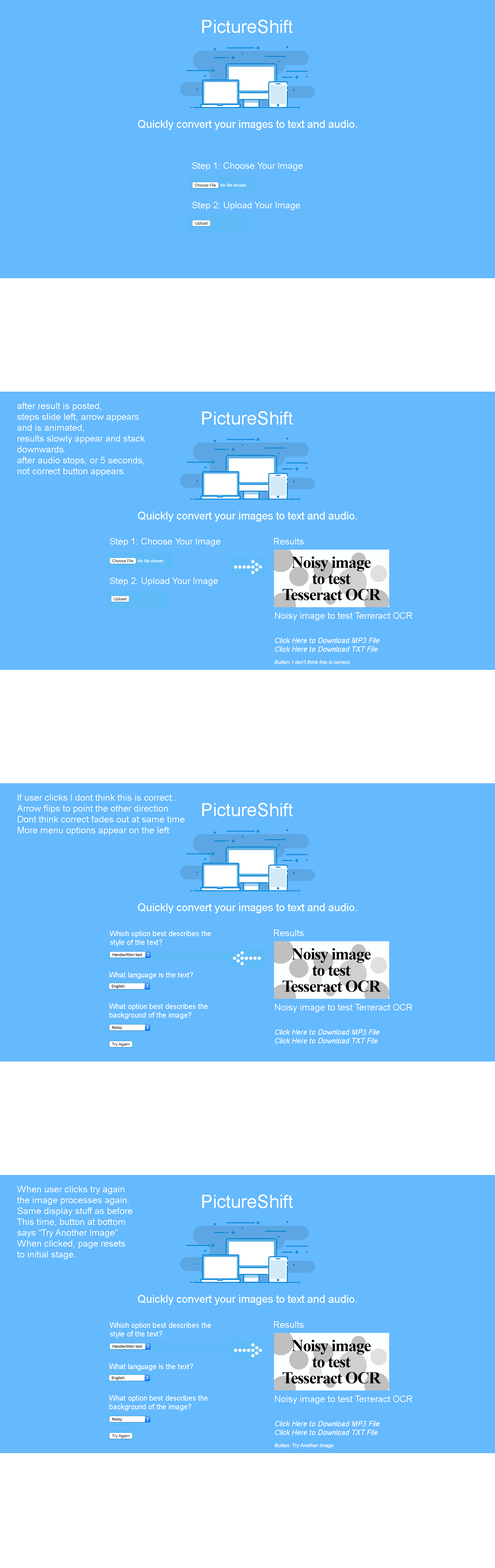
<style>
.page{position:relative;width:495px;height:1568px;background:#65b9fd}
.page>*{position:absolute;margin:0}
.t1{font:18.1px "ArialMT";color:#ffffff}
.t2{font:10.9px "ArialMT";color:#ffffff}
.t3{font:9.1px "ArialMT";color:#ffffff}
.t4{font:7.2px "ArialMT";color:#ffffff;font-style:italic}
.t5{font:5.1px "ArialMT";color:#ffffff;font-style:italic}
.t6{font:7.2px "ArialMT";color:#ffffff}
</style>
<div class="page">
<p class="t1" style="left:202px;top:20px;width:91px;height:13px">PictureShift</p>
<p class="t2" style="left:138px;top:120px;width:219px;height:10px">Quickly convert your images to text and audio.</p>
<p class="t3" style="left:192px;top:162px;width:111px;height:9px">Step 1: Choose Your Image</p>
<p class="t3" style="left:192px;top:202px;width:108px;height:8px">Step 2: Upload Your Image</p>
<p class="t3" style="left:17px;top:403px;width:128px;height:73px">after result is posted,<br>steps slide left, arrow appears<br>and is animated,<br>results slowly appear and stack<br>downwards.<br>after audio stops, or 5 seconds,<br>not correct button appears.</p>
<p class="t1" style="left:202px;top:411px;width:91px;height:14px">PictureShift</p>
<p class="t2" style="left:138px;top:512px;width:219px;height:10px">Quickly convert your images to text and audio.</p>
<p class="t3" style="left:110px;top:538px;width:110px;height:8px">Step 1: Choose Your Image</p>
<p class="t3" style="left:274px;top:538px;width:30px;height:7px">Results</p>
<p class="t3" style="left:110px;top:577px;width:108px;height:9px">Step 2: Upload Your Image</p>
<p class="t3" style="left:275px;top:612px;width:137px;height:9px">Noisy image to test Terreract OCR</p>
<p class="t4" style="left:275px;top:638px;width:104px;height:14px">Click Here to Download MP3 File<br>Click Here to Download TXT File</p>
<p class="t5" style="left:275px;top:660px;width:75px;height:4px">Button: I don’t think this is correct.</p>
<p class="t3" style="left:17px;top:794px;width:167px;height:41px">If user clicks I dont think this is correct..<br>Arrow flips to point the other direction<br>Dont think correct fades out at same time<br>More menu options appear on the left</p>
<p class="t1" style="left:202px;top:803px;width:91px;height:14px">PictureShift</p>
<p class="t2" style="left:138px;top:903px;width:219px;height:10px">Quickly convert your images to text and audio.</p>
<p class="t3" style="left:274px;top:930px;width:30px;height:6px">Results</p>
<p class="t6" style="left:110px;top:931px;width:101px;height:15px">Which option best describes the<br>style of the text?</p>
<p class="t6" style="left:109px;top:972px;width:84px;height:7px">What language is the text?</p>
<p class="t6" style="left:109px;top:1004px;width:99px;height:15px">What option best describes the<br>background of the image?</p>
<p class="t3" style="left:275px;top:1004px;width:137px;height:8px">Noisy image to test Terreract OCR</p>
<p class="t4" style="left:275px;top:1029px;width:104px;height:14px">Click Here to Download MP3 File<br>Click Here to Download TXT File</p>
<p class="t3" style="left:17px;top:1186px;width:115px;height:73px">When user clicks try again<br>the image processes again.<br>Same display stuff as before<br>This time, button at bottom<br>says “Try Another Image”<br>When clicked, page resets<br>to initial stage.</p>
<p class="t1" style="left:202px;top:1194px;width:91px;height:14px">PictureShift</p>
<p class="t2" style="left:138px;top:1295px;width:219px;height:10px">Quickly convert your images to text and audio.</p>
<p class="t6" style="left:110px;top:1322px;width:101px;height:16px">Which option best describes the<br>style of the text?</p>
<p class="t3" style="left:274px;top:1321px;width:30px;height:7px">Results</p>
<p class="t6" style="left:109px;top:1364px;width:84px;height:7px">What language is the text?</p>
<p class="t6" style="left:109px;top:1395px;width:99px;height:16px">What option best describes the<br>background of the image?</p>
<p class="t3" style="left:275px;top:1396px;width:137px;height:8px">Noisy image to test Terreract OCR</p>
<p class="t4" style="left:275px;top:1421px;width:104px;height:14px">Click Here to Download MP3 File<br>Click Here to Download TXT File</p>
<p class="t5" style="left:275px;top:1443px;width:58px;height:5px">Button: Try Another Image</p>
</div>
